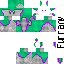
<style>
.page{position:relative;width:64px;height:64px;background:#ffffff}
.page>*{position:absolute;margin:0}
.t1{font:7.5px "Dogica_Pixel";color:#000000;scale:0.75 1}
</style>
<div class="page">
<p class="t1" style="left:57px;top:17px;width:7px;height:31px;rotate:-90deg">Furrany</p>
</div>
